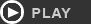
<style>
.page{position:relative;width:91px;height:24px;background:#333333}
.page>*{position:absolute;margin:0}
.t1{font:14.3px "Arial-BoldMT";letter-spacing:0.06em;color:#cbcbcb;text-transform:uppercase}
</style>
<div class="page">
<p class="t1" style="left:32px;top:8px;width:39px;height:10px">play</p>
</div>
